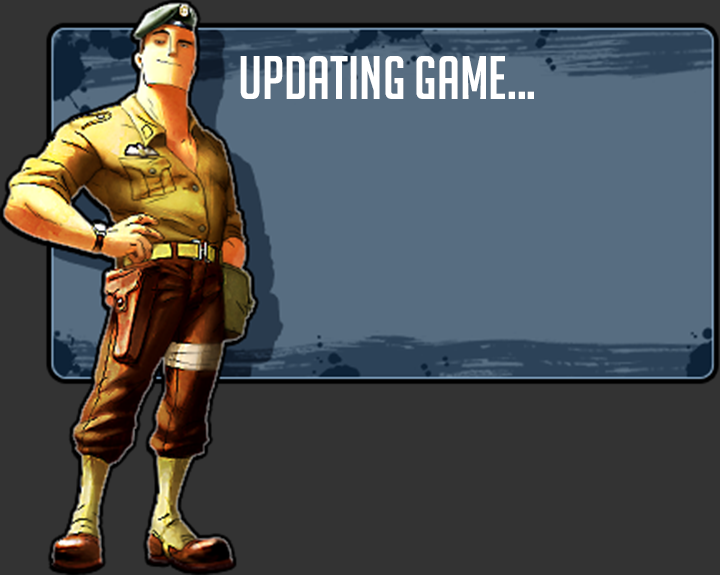
<style>
.page{position:relative;width:720px;height:575px;background:#333333}
.page>*{position:absolute;margin:0}
.t1{font:60px "BigNoodleTitling";color:#ffffff}
</style>
<div class="page">
<p class="t1" style="left:240px;top:56px;width:294px;height:43px">Updating game...</p>
</div>
